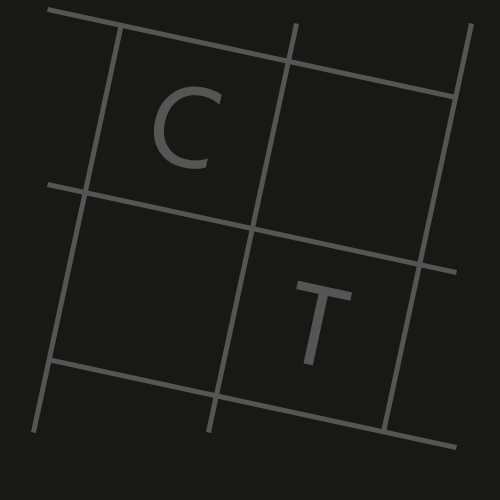
<style>
.page{position:relative;width:500px;height:500px;background:#181815}
.page>*{position:absolute;margin:0}
.t1{font:113.5px "Ebrima";color:#555555}
</style>
<div class="page">
<p class="t1" style="left:153px;top:86px;width:69px;height:83px;rotate:12deg">C</p>
<p class="t1" style="left:296px;top:280px;width:56px;height:86px;rotate:12deg">T</p>
</div>
